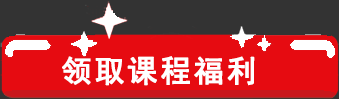
<style>
.page{position:relative;width:339px;height:99px;background:#e60b11}
.page>*{position:absolute;margin:0}
.t1{font:30px "SimHei";letter-spacing:0.075em;color:#ffffff;font-weight:bold}
</style>
<div class="page">
<p class="t1" style="left:62px;top:56px;width:193px;height:30px">领取课程福利</p>
</div>
